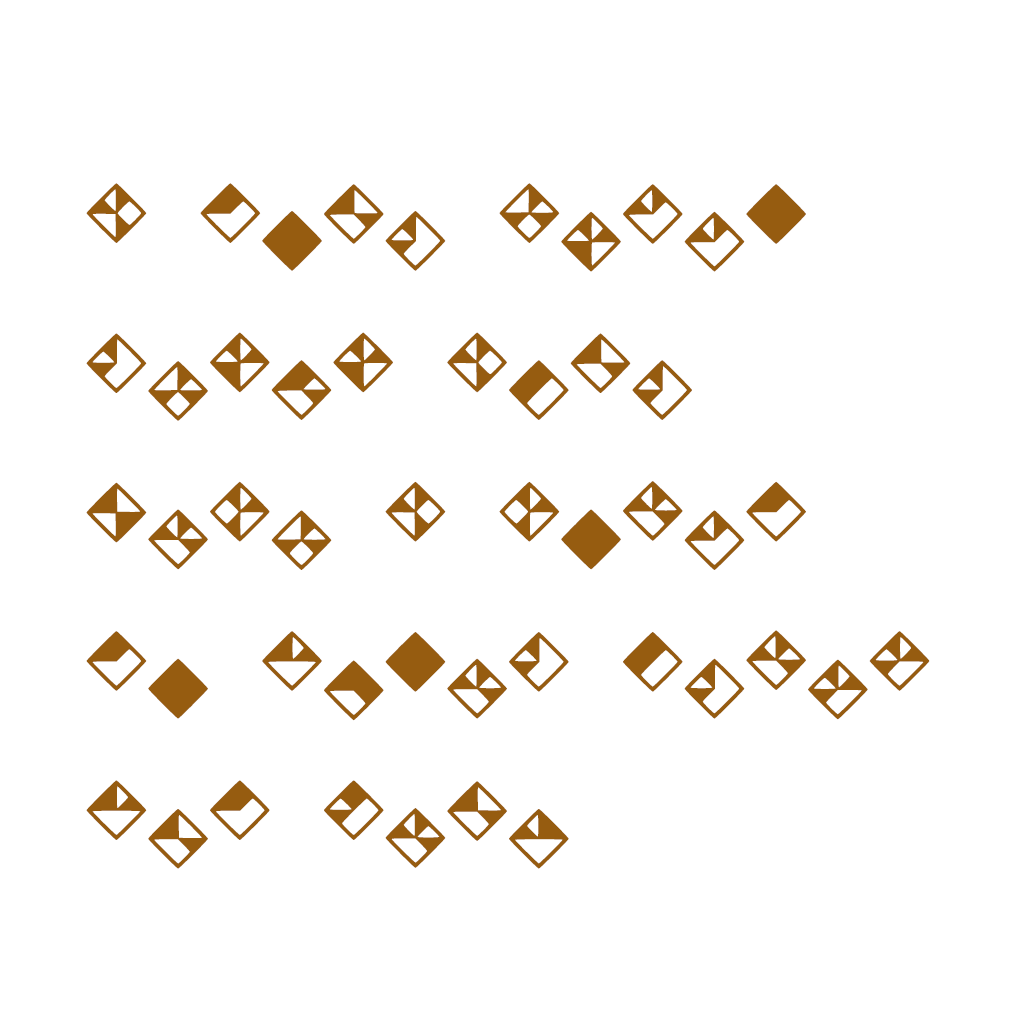
<style>
.page{position:relative;width:1024px;height:1024px;background:#ffffff}
.page>*{position:absolute;margin:0}
.t1{font:124.4px "moaiFontTest2";color:#965c10}
</style>
<div class="page">
<p class="t1" style="left:86px;top:183px;width:844px;height:686px">I DoNt HeLlO<br>ThErE IsNt MuCh I CoUlD Do AbOuT StUfF AnD JuNk</p>
</div>
